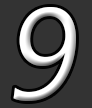
<style>
.page{position:relative;width:92px;height:108px;background:#333333}
.page>*{position:absolute;margin:0}
.t1{font:128px "SegoeUI-Italic";color:#ffffff}
</style>
<div class="page">
<p class="t1" style="left:13px;top:7px;width:63px;height:94px">9</p>
</div>
